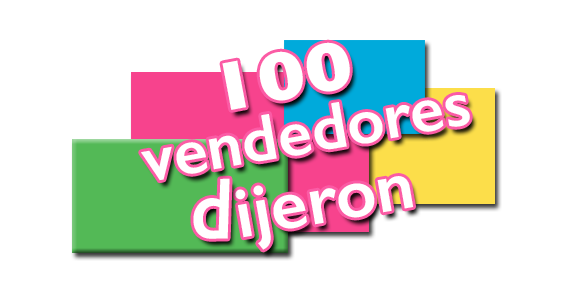
<style>
.page{position:relative;width:567px;height:293px;background:#ffffff}
.page>*{position:absolute;margin:0}
.t1{font:70px "GillSans-Bold";color:#ffffff;scale:1.16 1}
.t2{font:66.2px "GillSans-SemiBold";color:#ffffff}
.t3{font:82.8px "GillSans-SemiBold";color:#ffffff}
.t4{font:87.6px "GillSans-SemiBold";color:#ffffff;scale:0.88 1}
.t5{font:71.5px "GillSans-SemiBold";color:#ffffff}
</style>
<div class="page">
<p class="t1" style="left:222px;top:42px;width:128px;height:68px;rotate:-11deg">100</p>
<p class="t2" style="left:141px;top:95px;width:329px;height:86px;rotate:-10deg"><span class="t3"><br></span>vendedores</p>
<p class="t4" style="left:193px;top:178px;width:37px;height:61px;rotate:-1deg">d</p>
<p class="t5" style="left:235px;top:176px;width:179px;height:74px;rotate:-10deg">ijeron</p>
</div>
